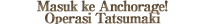
<style>
.page{position:relative;width:203px;height:26px;background:#ffffff}
.page>*{position:absolute;margin:0}
.t1{font:14px/12px "RyuminPro-ExBold";letter-spacing:-0.08em;color:#6d5940;font-weight:bold}
.t2{font:11.2px/12px "RyuminPro-ExBold";letter-spacing:-0.08em;color:#6d5940;font-weight:bold;scale:1.25 1}
</style>
<div class="page">
<p class="t1" style="left:37px;top:0px;width:131px;height:24px;text-align:center">Masuk ke Anchorage!<br>O<span class="t2">p</span>erasi Tatsumaki</p>
</div>
